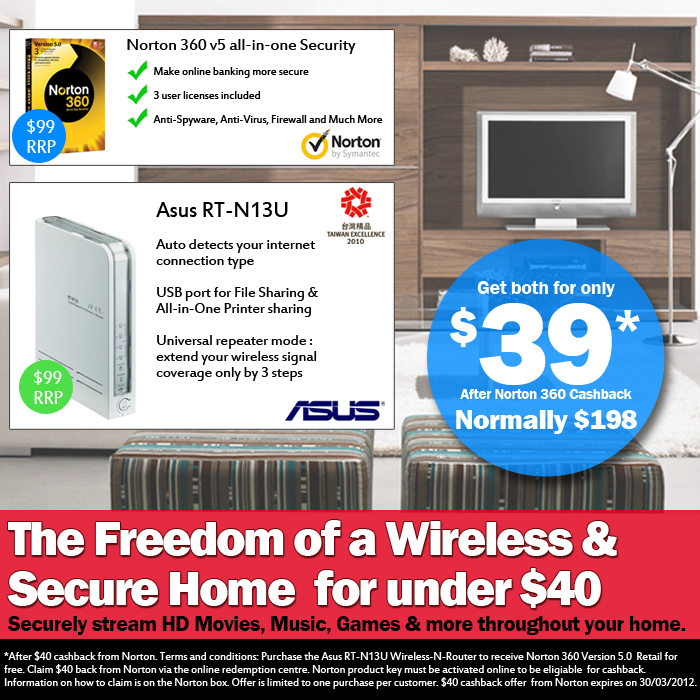
<style>
.page{position:relative;width:700px;height:700px;background:#ffffff}
.page>*{position:absolute;margin:0}
.t1{font:12.1px/12.1px "EstrangeloEdessa";letter-spacing:-0.022em;color:#000000}
.t2{font:18.1px/12.1px "EstrangeloEdessa";letter-spacing:-0.022em;color:#000000}
.t3{font:20px/20px "EstrangeloEdessa";letter-spacing:-0.022em;color:#ffffff}
.t4{font:16px/16px "EstrangeloEdessa";letter-spacing:-0.022em;color:#000000}
.t5{font:24px/16px "EstrangeloEdessa";letter-spacing:-0.022em;color:#000000}
.t6{font:15px/20px "FranklinGothic-Demi";letter-spacing:-0.022em;color:#ffffff}
.t7{font:20px/20px "FranklinGothic-Demi";letter-spacing:-0.022em;color:#ffffff}
.t8{font:50px/50px "FranklinGothic-Heavy";letter-spacing:-0.022em;color:#ffffff}
.t9{font:120px/30px "FranklinGothic-Heavy";letter-spacing:-0.022em;color:#ffffff}
.t10{font:28px/30px "FranklinGothic-Heavy";letter-spacing:-0.022em;color:#ffffff}
.t11{font:50px/50px "FranklinGothic-Heavy";letter-spacing:-0.048em;color:#ffffff}
.t12{font:22px "FranklinGothic-Demi";letter-spacing:-0.022em;color:#000000}
.t13{font:12px/13px "EstrangeloEdessa";letter-spacing:-0.022em;color:#ffffff}
</style>
<div class="page">
<p class="t1" style="left:127px;top:39px;width:256px;height:87px"><span class="t2">Norton 360 v5 all-in-one Security<br></span><br> Make online banking more secure<br><br> 3 user licenses included<br><br> Anti-Spyware, Anti-Virus, Firewall and Much More</p>
<p class="t3" style="left:27px;top:119px;width:29px;height:34px">$99<br>RRP</p>
<p class="t4" style="left:156px;top:202px;width:162px;height:179px"><span class="t5">Asus RT-N13U<br></span><br>Auto detects your internet <br>connection type<br><br>USB port for File Sharing &amp; <br>All-in-One Printer sharing<br><br>Universal repeater mode : <br>extend your wireless signal <br>coverage only by 3 steps</p>
<p class="t6" style="left:449px;top:281px;width:191px;height:153px;text-align:center"><span class="t7">Get both for only<br></span><span class="t8">$</span><span class="t9">39</span><span class="t8">*<br><br></span>After Norton 360 Cashback<br><span class="t10">Normally $198</span></p>
<p class="t3" style="left:34px;top:370px;width:29px;height:34px">$99<br>RRP</p>
<p class="t11" style="left:7px;top:520px;width:610px;height:88px">The Freedom of a Wireless &amp;<br>Secure Home  for under $40</p>
<p class="t12" style="left:8px;top:616px;width:677px;height:19px">Securely stream HD Movies, Music, Games &amp; more throughout your home.</p>
<p class="t13" style="left:4px;top:651px;width:693px;height:38px">*After $40 cashback from Norton. Terms and conditions: Purchase the Asus RT-N13U Wireless-N-Router to receive Norton 360 Version 5.0  Retail for <br>free. Claim $40 back from Norton via the online redemption centre. Norton product key must be activated online to be eligiable  for cashback. <br>Information on how to claim is on the Norton box. Offer is limited to one purchase per customer. $40 cashback offer  from Norton expires on 30/03/2012.</p>
</div>
